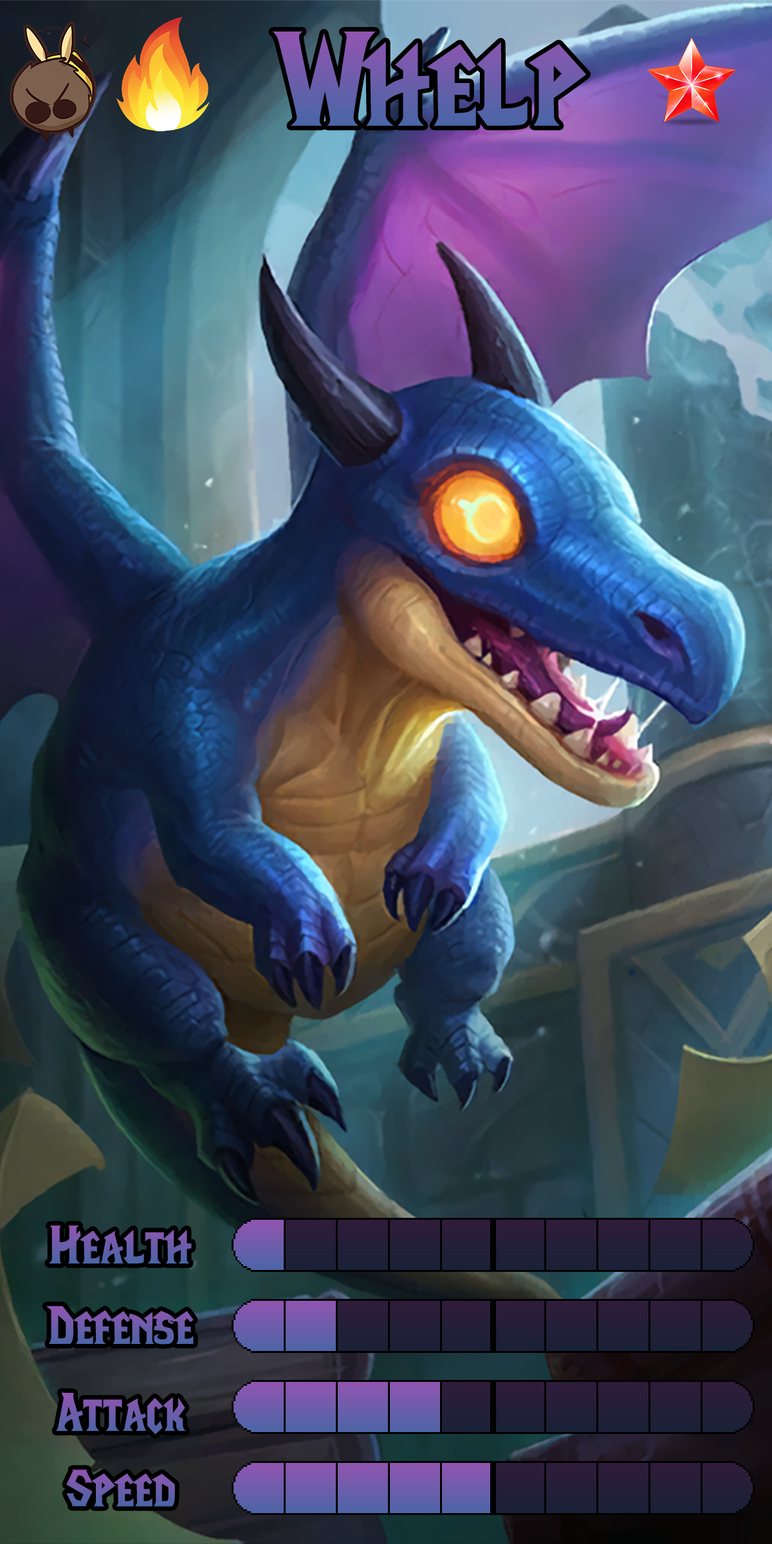
<style>
.page{position:relative;width:772px;height:1544px}
.page>*{position:absolute;margin:0}
.t1{font:230.4px "LifeCraft"}
.t2{font:92.7px "LifeCraft"}
</style>
<div class="page">
<p class="t1" style="left:273px;top:31px;width:314px;height:95px">Whelp</p>
<p class="t2" style="left:49px;top:1226px;width:143px;height:38px">Health</p>
<p class="t2" style="left:46px;top:1306px;width:148px;height:39px">Defense</p>
<p class="t2" style="left:56px;top:1392px;width:130px;height:43px">Attack</p>
<p class="t2" style="left:66px;top:1470px;width:109px;height:37px">Speed</p>
</div>
